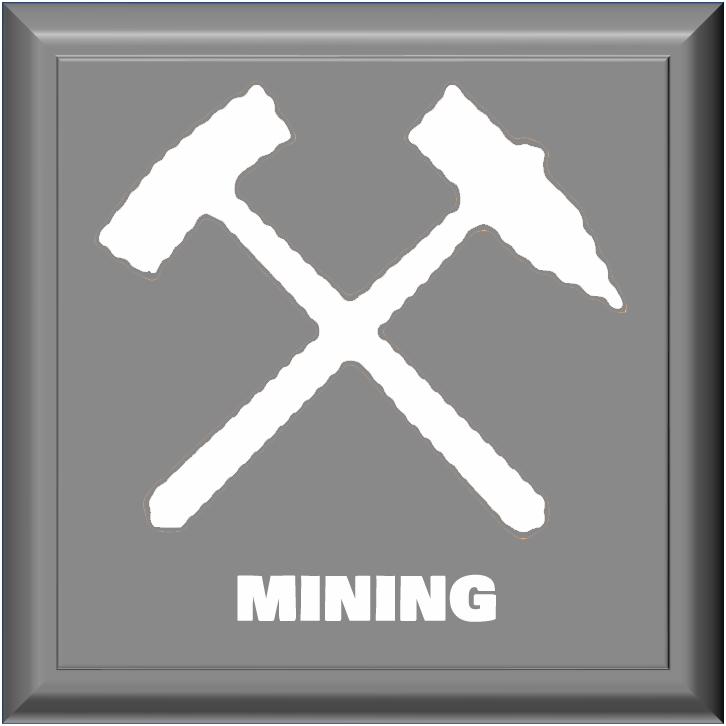
<style>
.page{position:relative;width:726px;height:726px;background:#898989}
.page>*{position:absolute;margin:0}
.t1{font:60px "BowlbyOneSC-Regular";color:#fefefe}
</style>
<div class="page">
<p class="t1" style="left:237px;top:574px;width:259px;height:48px">MINING</p>
</div>
